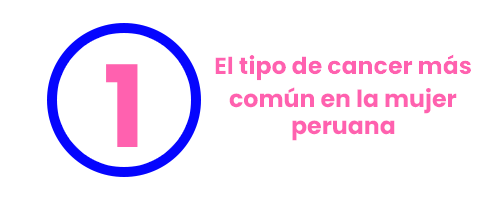
<style>
.page{position:relative;width:500px;height:200px;background:#ffffff}
.page>*{position:absolute;margin:0}
.t1{font:113.4px "Poppins-Bold";color:#ff61af}
.t2{font:23.7px "Poppins-Bold";color:#ff61af}
</style>
<div class="page">
<p class="t1" style="left:106px;top:64px;width:32px;height:83px">1</p>
<p class="t2" style="left:229px;top:87px;width:228px;height:27px">común en la mujer</p>
<p class="t2" style="left:292px;top:120px;width:103px;height:21px">peruana</p>
</div>
